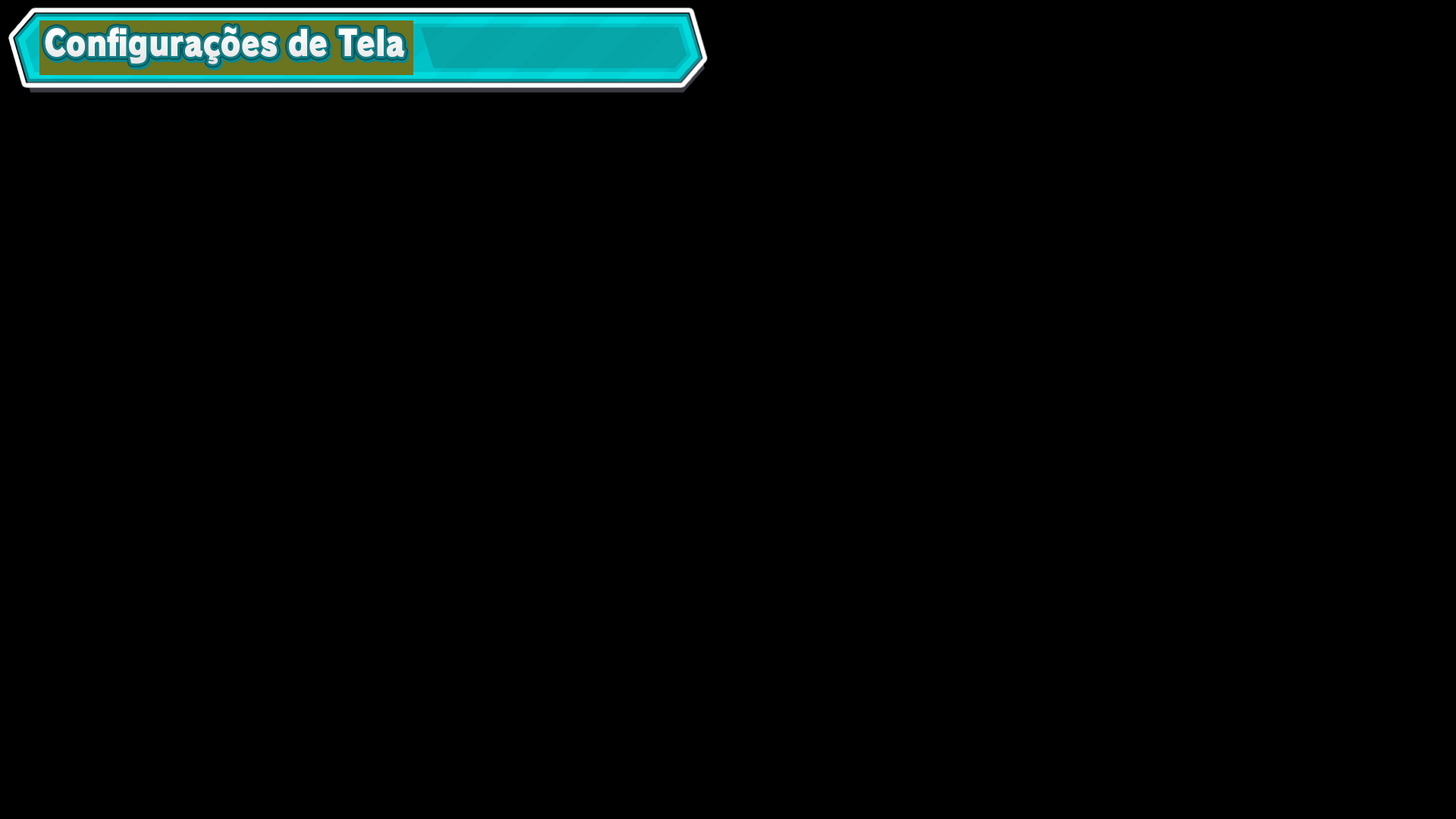
<style>
.page{position:relative;width:1456px;height:819px;background:#000000}
.page>*{position:absolute;margin:0}
.t1{font:35.4px "RodinPro-UB";letter-spacing:0.004em;color:#f2f2f3;scale:0.84 1}
</style>
<div class="page">
<p class="t1" style="left:45px;top:27px;width:360px;height:37px">Configurações de Tela</p>
</div>
